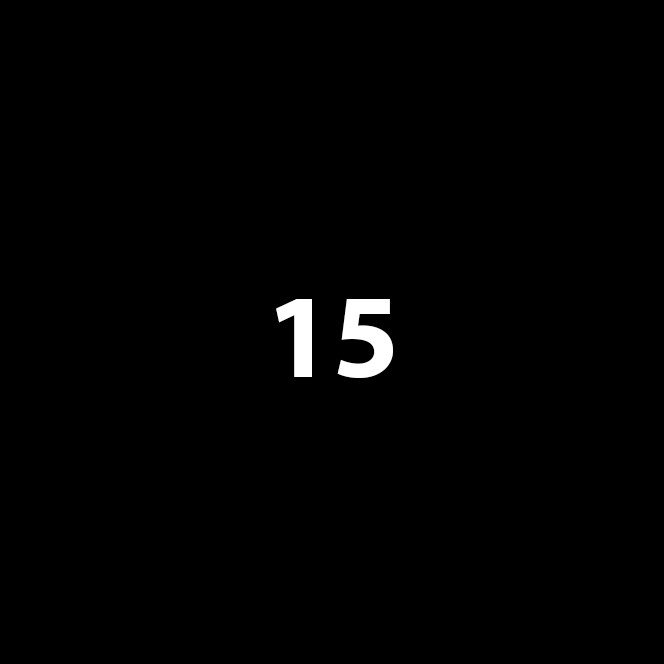
<style>
.page{position:relative;width:664px;height:664px;background:#000000}
.page>*{position:absolute;margin:0}
.t1{font:120px "MyriadPro-Bold";color:#ffffff}
</style>
<div class="page">
<p class="t1" style="left:276px;top:299px;width:117px;height:79px">15</p>
</div>
